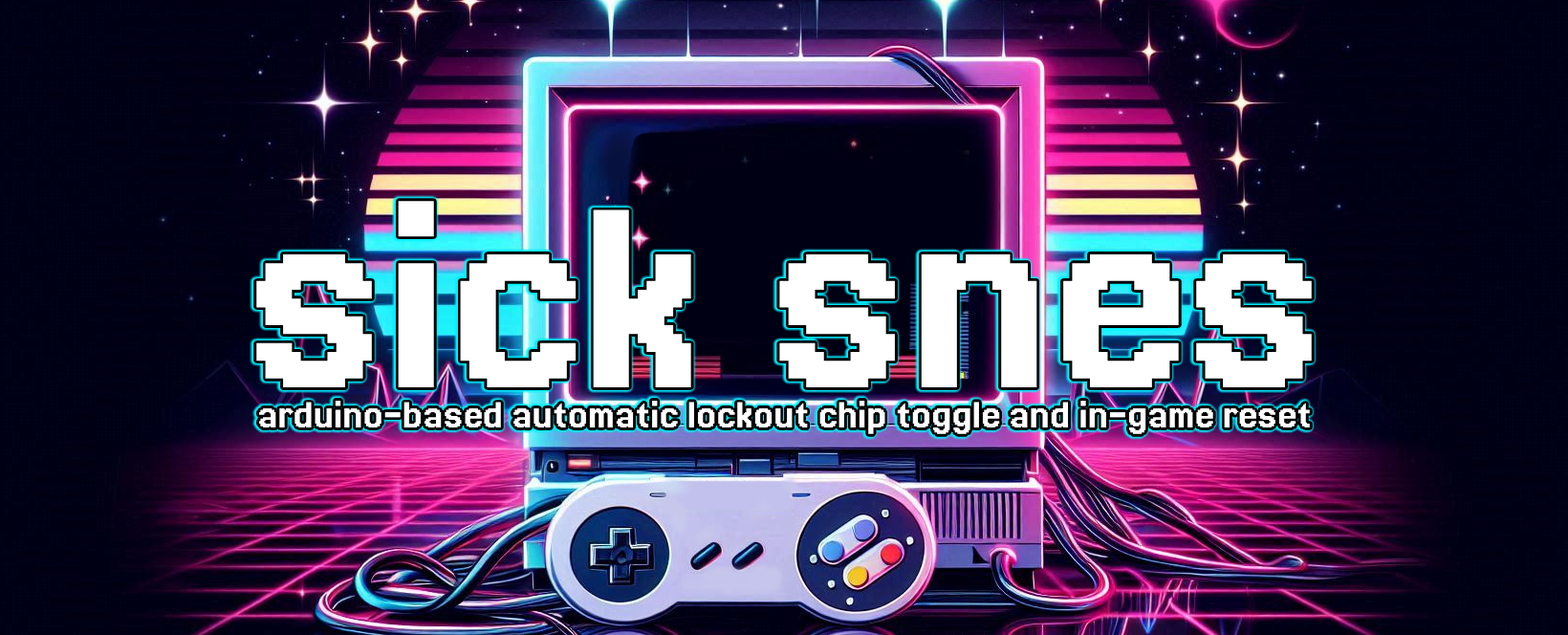
<style>
.page{position:relative;width:1568px;height:635px}
.page>*{position:absolute;margin:0}
.t1{font:301.4px "Jersey20-Regular";color:#ffffff}
.t2{font:43.2px "Jersey20-Regular";color:#ffffff}
</style>
<div class="page">
<p class="t1" style="left:256px;top:201px;width:1056px;height:187px">sick snes</p>
<p class="t2" style="left:259px;top:401px;width:1051px;height:33px">arduino-based automatic lockout chip toggle and in-game reset</p>
</div>
